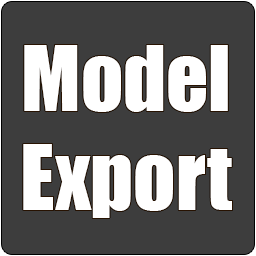
<style>
.page{position:relative;width:256px;height:256px;background:#3d3d3d}
.page>*{position:absolute;margin:0}
.t1{font:82.7px "Impact";color:#ffffff}
</style>
<div class="page">
<p class="t1" style="left:23px;top:45px;width:209px;height:173px;text-align:center">Model<br>Export</p>
</div>
